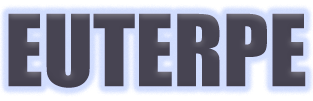
<style>
.page{position:relative;width:313px;height:101px;background:#474452}
.page>*{position:absolute;margin:0}
.t1{font:91.7px "Impact";color:#474452}
</style>
<div class="page">
<p class="t1" style="left:8px;top:13px;width:298px;height:75px">EUTERPE</p>
</div>
